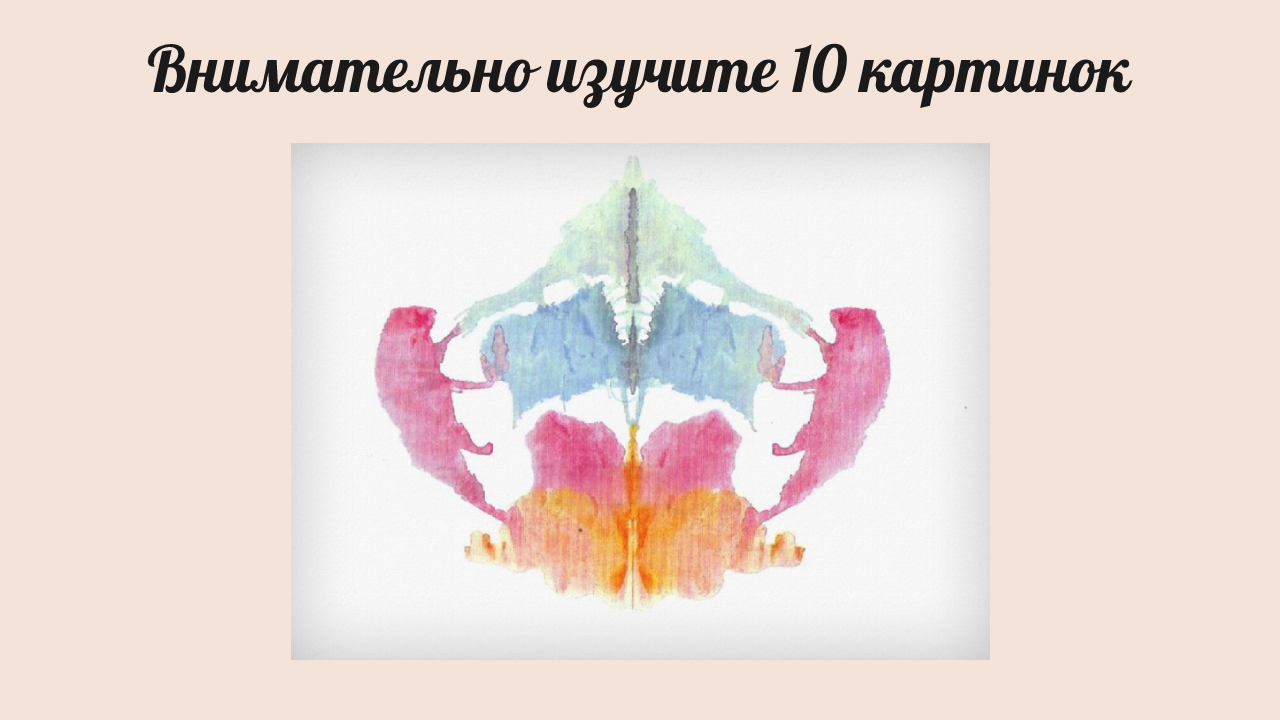
<style>
.page{position:relative;width:1280px;height:720px;background:#f3e3d8}
.page>*{position:absolute;margin:0}
.t1{font:64px "Pattaya-Regular";color:#1a1a1a}
</style>
<div class="page">
<p class="t1" style="left:147px;top:43px;width:986px;height:65px">Внимательно изучите 10 картинок</p>
</div>
